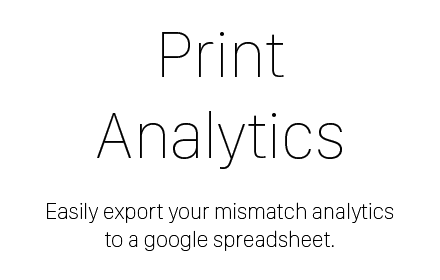
<style>
.page{position:relative;width:440px;height:280px;background:#ffffff}
.page>*{position:absolute;margin:0}
.t1{font:67.2px "SanFranciscoDisplay-Ultralight";color:#000000}
.t2{font:22.7px "SanFranciscoDisplay-Ultralight";color:#000000}
</style>
<div class="page">
<p class="t1" style="left:97px;top:32px;width:245px;height:137px;text-align:center">Print<br>Analytics</p>
<p class="t2" style="left:47px;top:202px;width:347px;height:49px;text-align:center">Easily export your mismatch analytics<br>to a google spreadsheet.</p>
</div>
